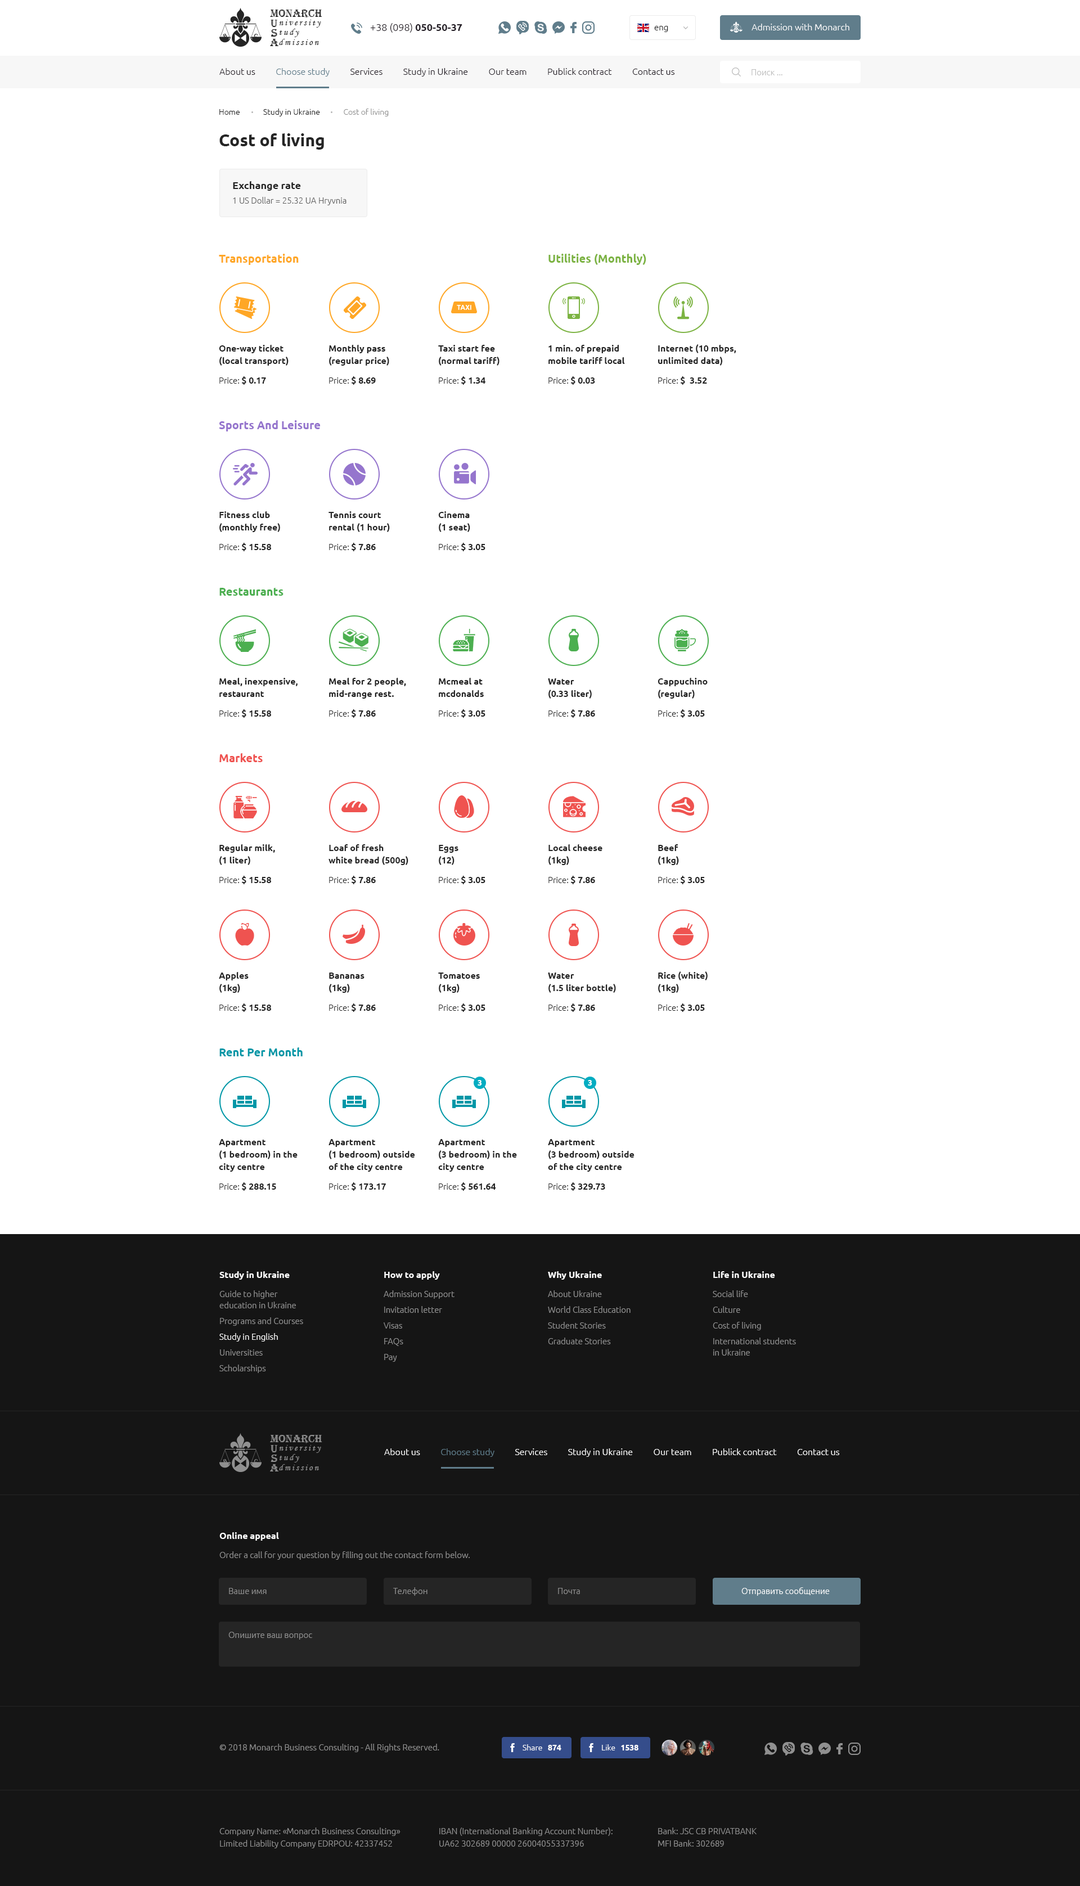
<style>
.page{position:relative;width:1080px;height:1886px;background:#ffffff}
.page>*{position:absolute;margin:0}
.t1{font:11.3px "Algerian";color:#252525}
.t2{font:9px "MonotypeCorsiva";letter-spacing:0.19em;color:#252525}
.t3{font:10.1px "Ubuntu-Light";color:#262028}
.t4{font:10.1px "Ubuntu-Bold";color:#262028}
.t5{font:8.4px "Ubuntu-Light";color:#252525}
.t6{font:9px "Ubuntu-Light";color:#ffffff}
.t7{font:9px "Ubuntu-Light";color:#262028}
.t8{font:9px "Ubuntu-Light";color:#607d8b}
.t9{font:8.4px "Ubuntu-Light";color:#bebebe}
.t10{font:7.9px "Ubuntu-Light";color:#202020}
.t11{font:7.9px "Ubuntu-Light";color:#909090}
.t12{font:16.9px "Ubuntu-Bold";color:#252525}
.t13{font:8.4px/14.6px "Ubuntu-Light";color:#606060}
.t14{font:10.1px/14.6px "Ubuntu-Bold";color:#252525}
.t15{font:11.2px "Ubuntu-Bold";color:#ffa726}
.t16{font:11.2px "Ubuntu-Bold";color:#7cb342}
.t17{font:9px/12.4px "Ubuntu-Bold";color:#252525}
.t18{font:9px "Ubuntu-Bold";color:#252525}
.t19{font:11.2px "Ubuntu-Bold";color:#9575cd}
.t20{font:11.2px "Ubuntu-Bold";color:#4caf50}
.t21{font:11.2px "Ubuntu-Bold";color:#ef5350}
.t22{font:11.2px "Ubuntu-Bold";color:#0097a7}
.t23{font:7.9px "Ubuntu-Bold";color:#ffffff}
.t24{font:8.4px/15.8px "Ubuntu-Light";color:#909090}
.t25{font:9px/11.2px "Ubuntu-Bold";color:#ffffff}
.t26{font:8.4px/19.1px "Ubuntu-Light";color:#909090}
.t27{font:8.4px/11.2px "Ubuntu-Light";color:#909090}
.t28{font:8.4px/15.8px "Ubuntu-Light";color:#ffffff}
.t29{font:11.3px "Algerian";color:#909090}
.t30{font:9px "MonotypeCorsiva";letter-spacing:0.19em;color:#909090}
.t31{font:8.4px "Ubuntu-Light";color:#909090}
.t32{font:8.4px "Ubuntu-Light";color:#ffffff}
.t33{font:7.9px "Ubuntu-Light";color:#ffffff}
.t34{font:8.4px/12.4px "Ubuntu-Light";color:#909090}
</style>
<div class="page">
<p class="t1" style="left:270px;top:10px;width:52px;height:8px">MONARCH</p>
<p class="t1" style="left:271px;top:29px;width:6px;height:8px">S</p>
<p class="t1" style="left:271px;top:20px;width:6px;height:7px">U</p>
<p class="t2" style="left:279px;top:20px;width:42px;height:8px">niversity</p>
<p class="t2" style="left:280px;top:29px;width:19px;height:8px">tudy</p>
<p class="t3" style="left:370px;top:23px;width:92px;height:10px">+38 (098) <span class="t4">050-50-37</span></p>
<p class="t5" style="left:654px;top:26px;width:14px;height:6px">eng</p>
<p class="t6" style="left:752px;top:24px;width:97px;height:6px">Admission with Monarch</p>
<p class="t1" style="left:270px;top:39px;width:9px;height:7px">A</p>
<p class="t2" style="left:279px;top:39px;width:40px;height:6px">dmission</p>
<p class="t7" style="left:219px;top:68px;width:456px;height:8px">About us          <span class="t8">Choose study </span>         Services          Study in Ukraine          Our team          Publick contract          Contact us</p>
<p class="t9" style="left:752px;top:69px;width:30px;height:6px">Поиск ...</p>
<p class="t10" style="left:219px;top:109px;width:170px;height:7px">Home             Study in Ukraine             <span class="t11">Cost of living</span></p>
<p class="t12" style="left:219px;top:133px;width:105px;height:17px">Cost of living</p>
<p class="t13" style="left:233px;top:181px;width:113px;height:24px"><span class="t14">Exchange rate<br></span>1 US Dollar = 25.32 UA Hryvnia</p>
<p class="t15" style="left:219px;top:254px;width:80px;height:11px">Transportation</p>
<p class="t16" style="left:548px;top:254px;width:98px;height:11px">Utilities (Monthly)</p>
<p class="t17" style="left:219px;top:345px;width:70px;height:21px">One-way ticket<br>(local transport)</p>
<p class="t17" style="left:329px;top:345px;width:60px;height:21px">Monthly pass<br>(regular price)</p>
<p class="t17" style="left:438px;top:345px;width:62px;height:21px">Taxi start fee<br>(normal tariff)</p>
<p class="t17" style="left:548px;top:345px;width:77px;height:19px">1 min. of prepaid<br>mobile tariff local</p>
<p class="t17" style="left:658px;top:344px;width:78px;height:22px">Internet (10 mbps,<br>unlimited data)</p>
<p class="t5" style="left:219px;top:376px;width:47px;height:9px">Price: <span class="t18">$ 0.17</span></p>
<p class="t5" style="left:329px;top:376px;width:47px;height:9px">Price: <span class="t18">$ 8.69</span></p>
<p class="t5" style="left:439px;top:376px;width:46px;height:9px">Price: <span class="t18">$ 1.34</span></p>
<p class="t5" style="left:548px;top:376px;width:47px;height:9px">Price: <span class="t18">$ 0.03</span></p>
<p class="t18" style="left:658px;top:376px;width:49px;height:9px"><span class="t5">Price: </span>$  3.52</p>
<p class="t19" style="left:219px;top:420px;width:101px;height:11px">Sports And Leisure</p>
<p class="t17" style="left:219px;top:511px;width:61px;height:21px">Fitness club<br>(monthly free)</p>
<p class="t17" style="left:328px;top:511px;width:62px;height:21px">Tennis court<br>rental (1 hour)</p>
<p class="t17" style="left:438px;top:511px;width:32px;height:21px">Cinema<br>(1 seat)</p>
<p class="t18" style="left:219px;top:543px;width:52px;height:8px"><span class="t5">Price: </span>$ 15.58</p>
<p class="t5" style="left:329px;top:543px;width:47px;height:8px">Price: <span class="t18">$ 7.86</span></p>
<p class="t5" style="left:439px;top:543px;width:46px;height:8px">Price: <span class="t18">$ 3.05</span></p>
<p class="t20" style="left:219px;top:588px;width:65px;height:8px">Restaurants</p>
<p class="t17" style="left:219px;top:678px;width:79px;height:19px">Meal, inexpensive,<br>restaurant</p>
<p class="t17" style="left:329px;top:678px;width:77px;height:21px">Meal for 2 people,<br>mid-range rest.</p>
<p class="t17" style="left:439px;top:678px;width:45px;height:19px">Mcmeal at<br>mcdonalds</p>
<p class="t17" style="left:658px;top:678px;width:50px;height:21px">Cappuchino<br>(regular)</p>
<p class="t17" style="left:548px;top:678px;width:44px;height:21px">Water<br>(0.33 liter)</p>
<p class="t18" style="left:219px;top:709px;width:52px;height:9px"><span class="t5">Price: </span>$ 15.58</p>
<p class="t5" style="left:329px;top:709px;width:47px;height:9px">Price: <span class="t18">$ 7.86</span></p>
<p class="t5" style="left:439px;top:709px;width:46px;height:9px">Price: <span class="t18">$ 3.05</span></p>
<p class="t5" style="left:548px;top:709px;width:47px;height:9px">Price: <span class="t18">$ 7.86</span></p>
<p class="t5" style="left:658px;top:709px;width:47px;height:9px">Price: <span class="t18">$ 3.05</span></p>
<p class="t21" style="left:219px;top:753px;width:44px;height:9px">Markets</p>
<p class="t17" style="left:219px;top:844px;width:56px;height:21px">Regular milk,<br>(1 liter)</p>
<p class="t17" style="left:328px;top:844px;width:80px;height:21px">Loaf of fresh<br>white bread (500g)</p>
<p class="t17" style="left:439px;top:845px;width:19px;height:20px">Eggs <br>(12)</p>
<p class="t17" style="left:548px;top:844px;width:54px;height:21px">Local cheese<br>(1kg)</p>
<p class="t17" style="left:658px;top:844px;width:21px;height:21px">Beef<br>(1kg)</p>
<p class="t18" style="left:219px;top:876px;width:52px;height:8px"><span class="t5">Price: </span>$ 15.58</p>
<p class="t5" style="left:329px;top:876px;width:47px;height:8px">Price: <span class="t18">$ 7.86</span></p>
<p class="t5" style="left:439px;top:876px;width:46px;height:8px">Price: <span class="t18">$ 3.05</span></p>
<p class="t5" style="left:548px;top:876px;width:47px;height:8px">Price: <span class="t18">$ 7.86</span></p>
<p class="t5" style="left:658px;top:876px;width:47px;height:8px">Price: <span class="t18">$ 3.05</span></p>
<p class="t17" style="left:219px;top:972px;width:30px;height:21px">Apples<br>(1kg)</p>
<p class="t17" style="left:329px;top:973px;width:35px;height:20px">Bananas<br>(1kg)</p>
<p class="t17" style="left:438px;top:973px;width:42px;height:20px">Tomatoes<br>(1kg)</p>
<p class="t17" style="left:548px;top:973px;width:68px;height:20px">Water <br>(1.5 liter bottle)</p>
<p class="t17" style="left:658px;top:971px;width:50px;height:22px">Rice (white)<br>(1kg)</p>
<p class="t18" style="left:219px;top:1004px;width:52px;height:8px"><span class="t5">Price: </span>$ 15.58</p>
<p class="t5" style="left:329px;top:1004px;width:47px;height:8px">Price: <span class="t18">$ 7.86</span></p>
<p class="t5" style="left:439px;top:1004px;width:46px;height:8px">Price: <span class="t18">$ 3.05</span></p>
<p class="t5" style="left:548px;top:1004px;width:47px;height:8px">Price: <span class="t18">$ 7.86</span></p>
<p class="t5" style="left:658px;top:1004px;width:47px;height:8px">Price: <span class="t18">$ 3.05</span></p>
<p class="t22" style="left:219px;top:1047px;width:84px;height:9px">Rent Per Month</p>
<p class="t23" style="left:478px;top:1080px;width:4px;height:6px">3</p>
<p class="t23" style="left:588px;top:1080px;width:4px;height:6px">3</p>
<p class="t17" style="left:219px;top:1139px;width:79px;height:33px">Apartment <br>(1 bedroom) in the city centre</p>
<p class="t17" style="left:328px;top:1139px;width:87px;height:33px">Apartment <br>(1 bedroom) outside of the city centre</p>
<p class="t17" style="left:438px;top:1139px;width:79px;height:33px">Apartment <br>(3 bedroom) in the city centre</p>
<p class="t17" style="left:548px;top:1139px;width:86px;height:33px">Apartment <br>(3 bedroom) outside of the city centre</p>
<p class="t18" style="left:219px;top:1182px;width:57px;height:9px"><span class="t5">Price: </span>$ 288.15</p>
<p class="t18" style="left:329px;top:1182px;width:57px;height:9px"><span class="t5">Price: </span>$ 173.17</p>
<p class="t18" style="left:439px;top:1182px;width:57px;height:9px"><span class="t5">Price: </span>$ 561.64</p>
<p class="t18" style="left:548px;top:1182px;width:57px;height:9px"><span class="t5">Price: </span>$ 329.73</p>
<p class="t24" style="left:219px;top:1271px;width:84px;height:102px"><span class="t25">Study in Ukraine<br></span><span class="t26">Guide to higher <br></span><span class="t27">education in Ukraine<br></span>Programs and Courses<br><span class="t28">Study in English<br></span>Universities<br>Scholarships</p>
<p class="t24" style="left:384px;top:1271px;width:70px;height:91px"><span class="t25">How to apply<br></span><span class="t26">Admission Support<br></span>Invitation letter<br>Visas<br>FAQs<br>Pay</p>
<p class="t24" style="left:548px;top:1271px;width:83px;height:73px"><span class="t25">Why Ukraine<br></span><span class="t26">About Ukraine<br></span>World Class Education<br>Student Stories<br>Graduate Stories</p>
<p class="t24" style="left:713px;top:1271px;width:83px;height:85px"><span class="t25">Life in Ukraine<br></span><span class="t26">Social life<br></span>Culture<br>Cost of living<br>International students <br><span class="t27">in Ukraine</span></p>
<p class="t29" style="left:270px;top:1435px;width:52px;height:8px">MONARCH</p>
<p class="t29" style="left:271px;top:1445px;width:6px;height:7px">U</p>
<p class="t30" style="left:279px;top:1445px;width:42px;height:8px">niversity</p>
<p class="t29" style="left:271px;top:1455px;width:6px;height:7px">S</p>
<p class="t30" style="left:280px;top:1454px;width:19px;height:8px">tudy</p>
<p class="t6" style="left:384px;top:1448px;width:456px;height:9px">About us          <span class="t8">Choose study</span>          Services          Study in Ukraine          Our team          Publick contract          Contact us</p>
<p class="t29" style="left:270px;top:1464px;width:9px;height:8px">A</p>
<p class="t30" style="left:279px;top:1464px;width:40px;height:6px">dmission</p>
<p class="t26" style="left:219px;top:1532px;width:251px;height:28px"><span class="t25">Online appeal<br></span>Order a call for your question by filling out the contact form below.</p>
<p class="t31" style="left:229px;top:1588px;width:38px;height:6px">Ваше имя</p>
<p class="t31" style="left:393px;top:1587px;width:35px;height:9px">Телефон</p>
<p class="t31" style="left:558px;top:1588px;width:22px;height:6px">Почта</p>
<p class="t32" style="left:741px;top:1587px;width:89px;height:9px">Отправить сообщение</p>
<p class="t31" style="left:228px;top:1632px;width:84px;height:8px">Опишите ваш вопрос</p>
<p class="t31" style="left:219px;top:1744px;width:220px;height:8px">© 2018 Monarch Business Consulting - All Rights Reserved.</p>
<p class="t33" style="left:523px;top:1744px;width:38px;height:6px">Share   <span class="t23">874</span></p>
<p class="t33" style="left:602px;top:1744px;width:36px;height:6px">Like   <span class="t23">1538</span></p>
<p class="t34" style="left:219px;top:1828px;width:181px;height:20px">Company Name: «Monarch Business Consulting»<br>Limited Liability Company EDRPOU: 42337452</p>
<p class="t34" style="left:439px;top:1828px;width:174px;height:19px">IBAN (International Banking Account Number): <br>UA62 302689 00000 26004055337396</p>
<p class="t34" style="left:658px;top:1828px;width:99px;height:19px">Bank: JSC CB PRIVATBANK<br>MFI Bank: 302689</p>
</div>
